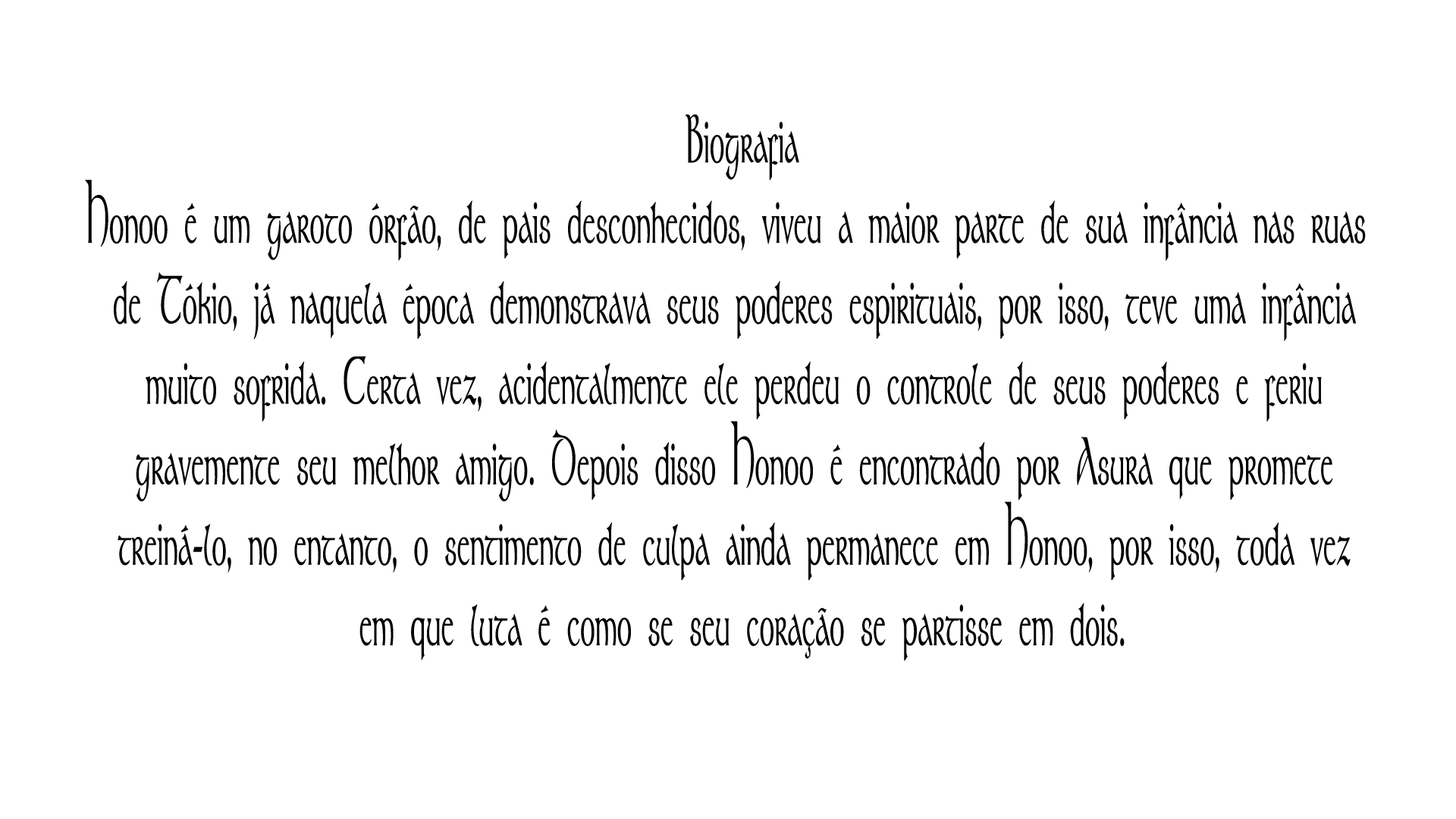
<style>
.page{position:relative;width:1456px;height:819px;background:#ffffff}
.page>*{position:absolute;margin:0}
.t1{font:67.1px "Stonehenge";color:#030303;font-weight:bold;scale:0.45 1}
</style>
<div class="page">
<p class="t1" style="left:85px;top:114px;width:1281px;height:547px;text-align:center">Biografia<br>Honoo é um garoto órfão, de pais desconhecidos, viveu a maior parte de sua infância nas ruas  <br>de Tókio, já naquela época demonstrava seus poderes espirituais, por isso, teve uma infância <br>muito sofrida. Certa vez, acidentalmente ele perdeu o controle de seus poderes e feriu <br>gravemente seu melhor amigo. Depois disso Honoo é encontrado por Asura que promete <br>treiná-lo, no entanto, o sentimento de culpa ainda permanece em Honoo, por isso, toda vez <br>em que luta é como se seu coração se partisse em dois.</p>
</div>
